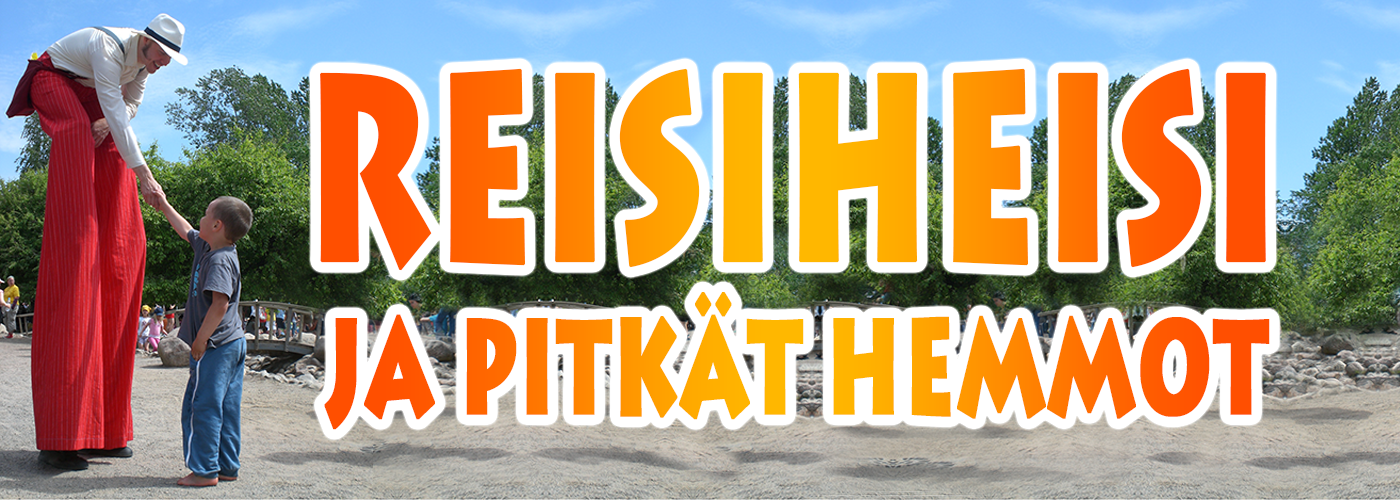
<style>
.page{position:relative;width:1400px;height:500px}
.page>*{position:absolute;margin:0}
.t1{font:132.3px "LithosPro-Black";text-transform:uppercase;font-weight:bold;scale:0.62 1}
.t2{font:262.8px "LithosPro-Black";text-transform:uppercase;font-weight:bold;scale:0.62 1}
</style>
<div class="page">
<p class="t1" style="left:320px;top:68px;width:950px;height:362px"><span class="t2">reisiheisi <br> </span>ja pitkät HEMMOT</p>
</div>
